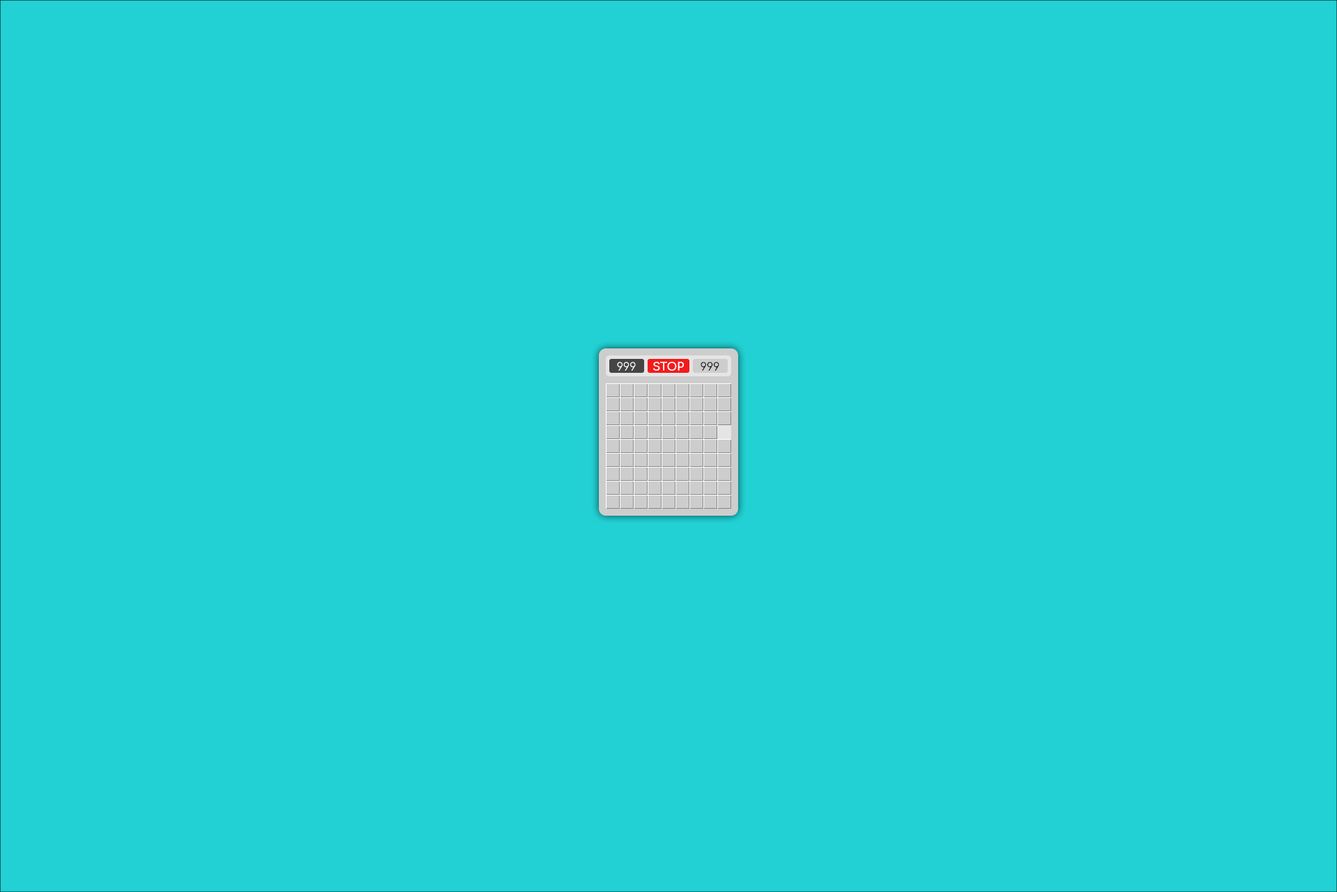
<style>
.page{position:relative;width:1337px;height:892px;background:#22d1d4}
.page>*{position:absolute;margin:0}
.t1{font:11.1px "Comfortaa-Regular";color:#ffffff}
.t2{font:11.1px "Comfortaa-Bold";color:#ffffff;text-transform:uppercase}
.t3{font:11.1px "Comfortaa-Regular";color:#020202}
</style>
<div class="page">
<p class="t1" style="left:617px;top:362px;width:19px;height:9px">999</p>
<p class="t2" style="left:653px;top:362px;width:31px;height:9px">stop</p>
<p class="t3" style="left:701px;top:362px;width:19px;height:9px">999</p>
</div>
